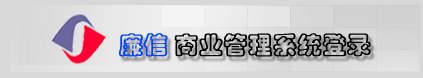
<style>
.page{position:relative;width:423px;height:78px}
.page>*{position:absolute;margin:0}
.t1{font:24px "STCaiyun";color:#000000;font-weight:bold}
.t2{font:24px "STCaiyun";color:#0042ff;font-weight:bold}
</style>
<div class="page">
<p class="t1" style="left:119px;top:33px;width:252px;height:24px"><span class="t2">廉信 </span>商业管理系统登录</p>
</div>
